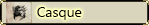
<style>
.page{position:relative;width:149px;height:25px;background:#d9d5bd}
.page>*{position:absolute;margin:0}
.t1{font:14px "LaoUI";color:#000000}
</style>
<div class="page">
<p class="t1" style="left:37px;top:7px;width:45px;height:13px">Casque</p>
</div>
